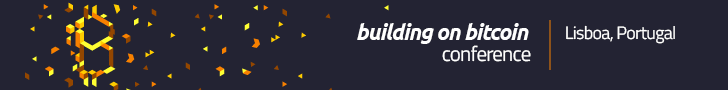
<style>
.page{position:relative;width:728px;height:90px;background:#232333}
.page>*{position:absolute;margin:0}
.t1{font:22.1px "Ubuntu-BoldItalic";letter-spacing:-0.04em;color:#ffffff}
.t2{font:18.1px "TitilliumWeb-Regular";letter-spacing:-0.04em;color:#ffffff}
.t3{font:21px "TitilliumWeb-Regular";letter-spacing:-0.04em;color:#ffffff}
</style>
<div class="page">
<p class="t1" style="left:357px;top:23px;width:172px;height:21px">building on bitcoin</p>
<p class="t2" style="left:566px;top:25px;width:109px;height:19px">Lisboa, Portugal</p>
<p class="t3" style="left:442px;top:45px;width:89px;height:17px">conference</p>
</div>
